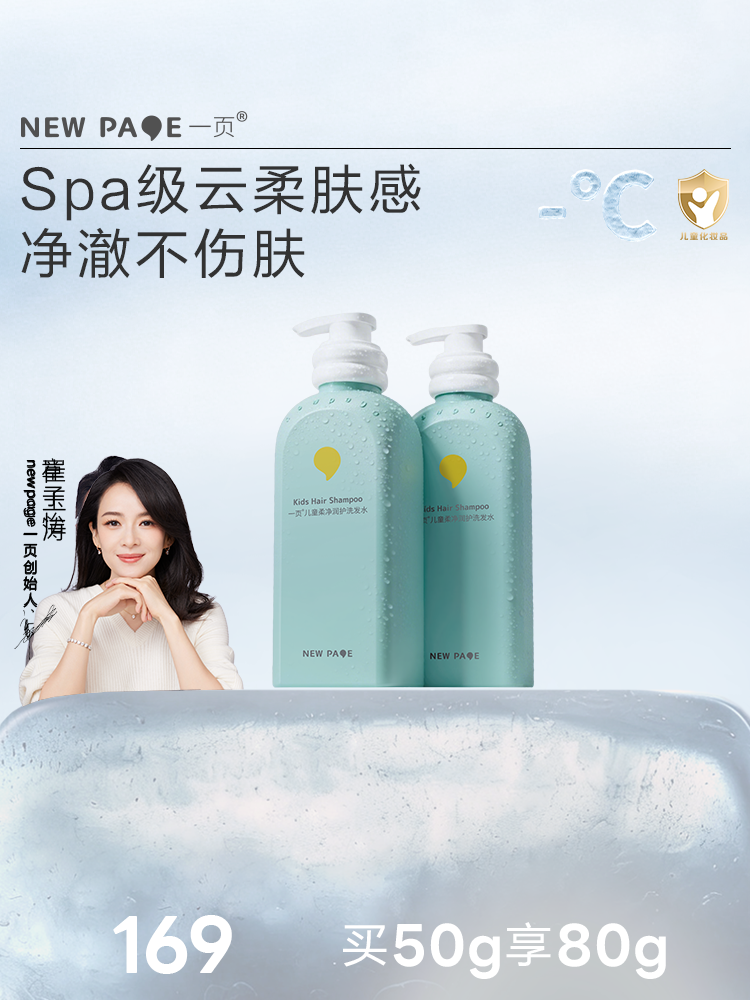
<style>
.page{position:relative;width:750px;height:1000px}
.page>*{position:absolute;margin:0}
.t1{font:54px/64px "FZLTHK--GBK1-0";letter-spacing:0.075em;color:#323232}
.t2{font:76.7px "LINESeedSansApp-Bold";letter-spacing:-0.02em;color:#ffffff}
.t3{font:57.2px "LINESeedSansApp-Bold";letter-spacing:0.02em;color:#ffffff}
.t4{font:47.2px "FZLTHK--GBK1-0";letter-spacing:0.075em;color:#ffffff}
</style>
<div class="page">
<p class="t1" style="left:21px;top:163px;width:400px;height:116px">Spa级云柔肤感 <br>净澈不伤肤</p>
<p class="t2" style="left:113px;top:915px;width:119px;height:59px">169</p>
<p class="t3" style="left:343px;top:922px;width:323px;height:57px"><span class="t4">买</span>50g<span class="t4">享</span>80g</p>
</div>
